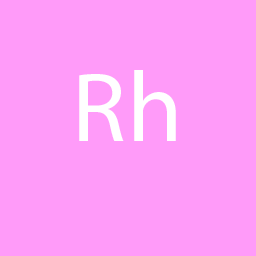
<style>
.page{position:relative;width:256px;height:256px;background:#ff9bf9}
.page>*{position:absolute;margin:0}
.t1{font:100px "MyriadPro-Regular";color:#ffffff}
</style>
<div class="page">
<p class="t1" style="left:79px;top:70px;width:97px;height:71px">Rh</p>
</div>
